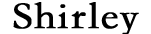
<style>
.page{position:relative;width:151px;height:34px;background:#ffffff}
.page>*{position:absolute;margin:0}
.t1{font:38.8px "STKaiti";color:#000000;font-weight:bold;scale:1.08 1}
</style>
<div class="page">
<p class="t1" style="left:13px;top:2px;width:126px;height:34px">Shirley</p>
</div>
